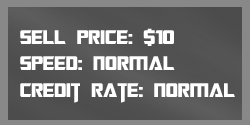
<style>
.page{position:relative;width:250px;height:125px}
.page>*{position:absolute;margin:0}
.t1{font:22px "TransformersMovie";color:#ffffff}
.t2{font:22px "TransformersMovie";letter-spacing:0.02em;color:#ffffff}
</style>
<div class="page">
<p class="t1" style="left:20px;top:28px;width:215px;height:75px">sell p<span class="t2">ri</span>ce: $10<br>spee<span class="t2">d</span>: <span class="t2">normal<br></span>credit rate: <span class="t2">normal</span></p>
</div>
